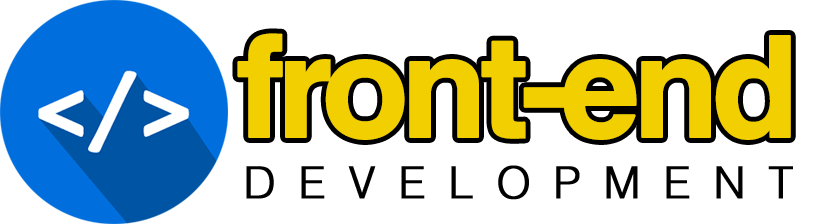
<style>
.page{position:relative;width:816px;height:224px;background:#ffffff}
.page>*{position:absolute;margin:0}
.t1{font:140.9px "Helvetica-Bold";letter-spacing:-0.075em;color:#f1cf00;font-weight:bold}
.t2{font:44px "HelveticaLight";letter-spacing:0.5em;color:#000000;font-weight:bold}
</style>
<div class="page">
<p class="t1" style="left:237px;top:33px;width:554px;height:107px">front-end</p>
<p class="t2" style="left:246px;top:165px;width:547px;height:35px">DEVELOPMENT</p>
</div>
